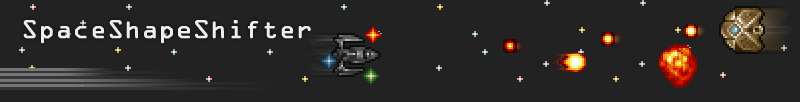
<style>
.page{position:relative;width:800px;height:102px;background:#222222}
.page>*{position:absolute;margin:0}
.t1{font:23px "OCRAStd";color:#eeeeee;font-weight:bold}
</style>
<div class="page">
<p class="t1" style="left:23px;top:20px;width:288px;height:24px">SpaceShapeShifter</p>
</div>
